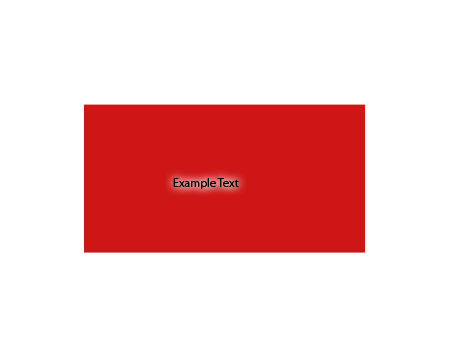
<style>
.page{position:relative;width:454px;height:340px;background:#ffffff}
.page>*{position:absolute;margin:0}
.t1{font:12px "MyriadPro-Regular";color:#000000}
</style>
<div class="page">
<p class="t1" style="left:173px;top:178px;width:66px;height:11px">Example Text</p>
</div>
